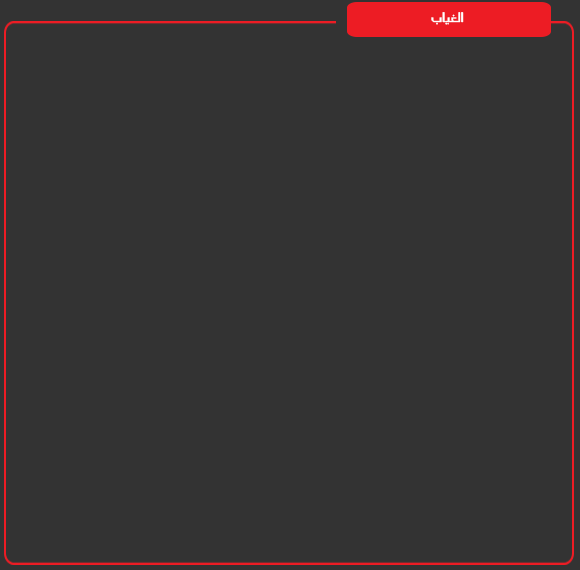
<style>
.page{position:relative;width:580px;height:570px;background:#333333}
.page>*{position:absolute;margin:0}
.t1{font:16px "SC_KHALID";color:#ffffff}
</style>
<div class="page">
<p class="t1" style="left:431px;top:12px;width:33px;height:13px">الغياب</p>
</div>
